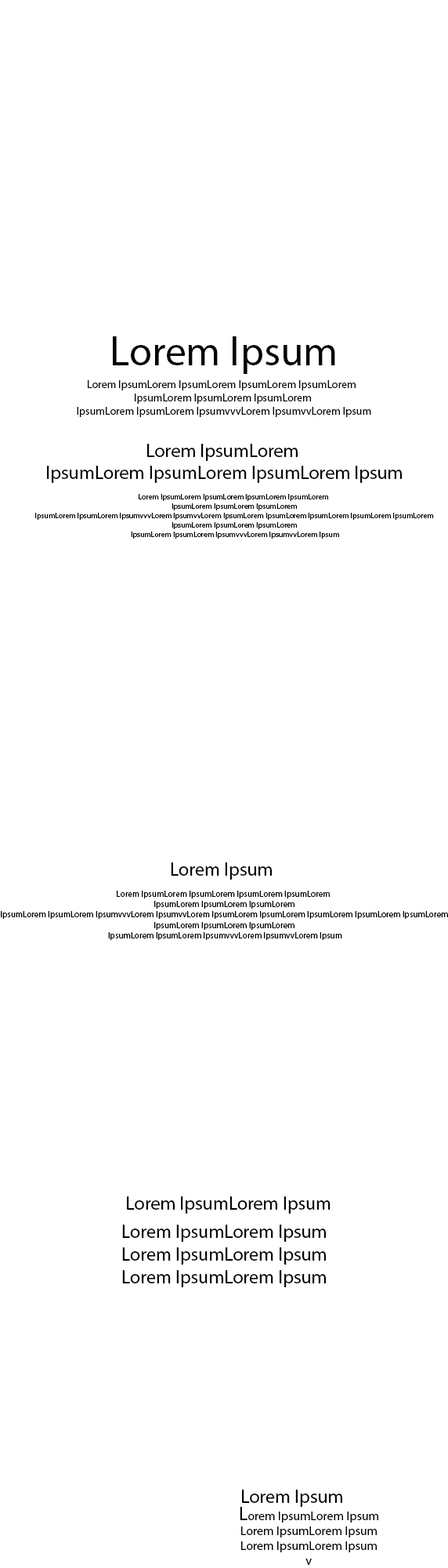
<style>
.page{position:relative;width:448px;height:1568px;background:#ffffff}
.page>*{position:absolute;margin:0}
.t1{font:41.8px "MyriadPro-Regular";color:#030303}
.t2{font:11px "MyriadPro-Regular";color:#030303}
.t3{font:18.8px "MyriadPro-Regular";color:#030303}
.t4{font:7.8px "MyriadPro-Regular";color:#030303}
.t5{font:8.7px "MyriadPro-Regular";color:#030303}
.t6{font:12.5px "MyriadPro-Regular";color:#030303}
</style>
<div class="page">
<p class="t1" style="left:113px;top:336px;width:223px;height:38px">Lorem Ipsum</p>
<p class="t2" style="left:77px;top:380px;width:295px;height:37px;text-align:center">Lorem IpsumLorem IpsumLorem IpsumLorem IpsumLorem <br>IpsumLorem IpsumLorem IpsumLorem<br> IpsumLorem IpsumLorem IpsumvvvLorem IpsumvvLorem Ipsum</p>
<p class="t3" style="left:47px;top:444px;width:355px;height:39px;text-align:center">Lorem IpsumLorem <br>IpsumLorem IpsumLorem IpsumLorem Ipsum</p>
<p class="t4" style="left:35px;top:494px;width:399px;height:45px;text-align:center">Lorem IpsumLorem IpsumLorem IpsumLorem IpsumLorem <br>IpsumLorem IpsumLorem IpsumLorem<br> IpsumLorem IpsumLorem IpsumvvvLorem IpsumvvLorem IpsumLorem IpsumLorem IpsumLorem IpsumLorem IpsumLorem <br>IpsumLorem IpsumLorem IpsumLorem<br> IpsumLorem IpsumLorem IpsumvvvLorem IpsumvvLorem Ipsum</p>
<p class="t3" style="left:171px;top:862px;width:101px;height:18px">Lorem Ipsum</p>
<p class="t5" style="left:1px;top:891px;width:447px;height:49px;text-align:center">Lorem IpsumLorem IpsumLorem IpsumLorem IpsumLorem <br>IpsumLorem IpsumLorem IpsumLorem<br> IpsumLorem IpsumLorem IpsumvvvLorem IpsumvvLorem IpsumLorem IpsumLorem IpsumLorem IpsumLorem IpsumLorem <br>IpsumLorem IpsumLorem IpsumLorem<br> IpsumLorem IpsumLorem IpsumvvvLorem IpsumvvLorem Ipsum</p>
<p class="t3" style="left:127px;top:1196px;width:204px;height:18px">Lorem IpsumLorem Ipsum</p>
<p class="t3" style="left:122px;top:1225px;width:204px;height:62px;text-align:center">Lorem IpsumLorem Ipsum<br>Lorem IpsumLorem Ipsum<br>Lorem IpsumLorem Ipsum</p>
<p class="t3" style="left:242px;top:1490px;width:101px;height:17px">Lorem Ipsum</p>
<p class="t6" style="left:240px;top:1507px;width:139px;height:58px;text-align:center"><span class="t3">L</span>orem IpsumLorem Ipsum<br>Lorem IpsumLorem Ipsum<br>Lorem IpsumLorem Ipsum<br>v</p>
</div>
